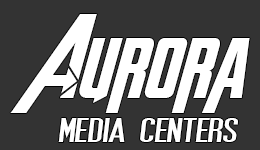
<style>
.page{position:relative;width:260px;height:150px;background:#333333}
.page>*{position:absolute;margin:0}
.t1{font:82.2px "AvengeanceHeroicAvengerBoldItalic";color:#ffffff;scale:0.94 1}
.t2{font:39.3px "SFMoviePosterCondensed-BoldOblique";color:#ffffff;scale:2.25 1}
</style>
<div class="page">
<p class="t1" style="left:10px;top:14px;width:240px;height:99px">Aurora</p>
<p class="t2" style="left:58px;top:118px;width:180px;height:24px">MEDIA CENTERS</p>
</div>
